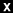
<style>
.page{position:relative;width:13px;height:13px;background:#000000}
.page>*{position:absolute;margin:0}
.t1{font:11px "CenturyGothic-Bold";color:#ffffff;font-weight:bold}
</style>
<div class="page">
<p class="t1" style="left:3px;top:3px;width:8px;height:9px">X</p>
</div>
